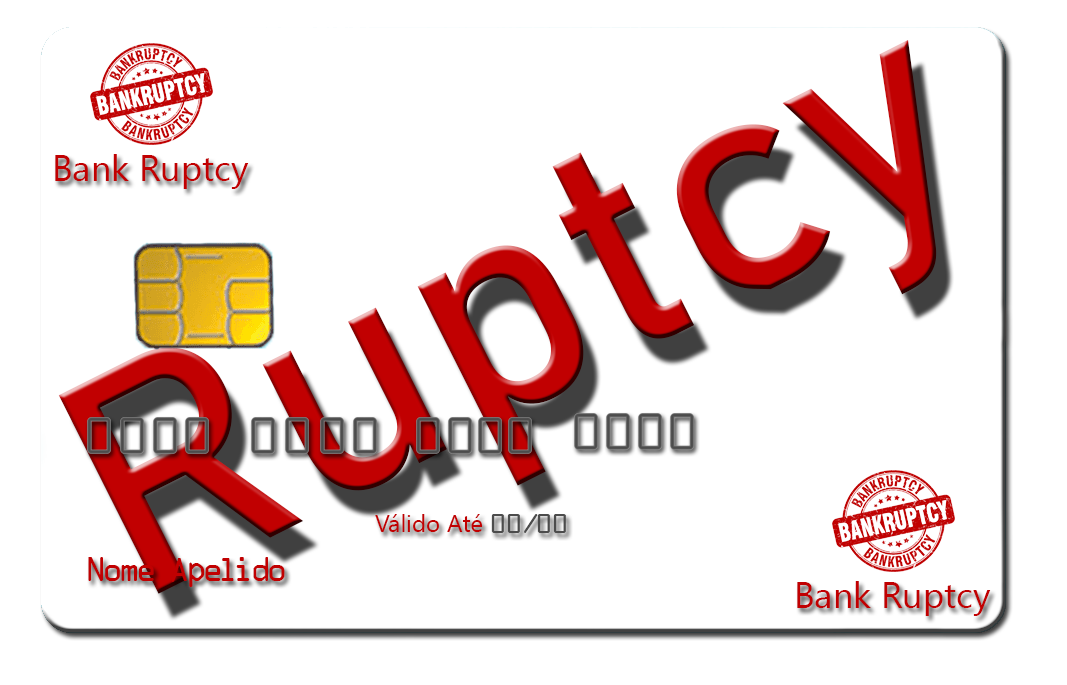
<style>
.page{position:relative;width:1067px;height:685px;background:#ffffff}
.page>*{position:absolute;margin:0}
.t1{font:312.6px "Bahnschrift";color:#c10001}
.t2{font:36px "SegoeUI";color:#c10001}
.t3{font:24px "SegoeUI";color:#c10001}
.t4{font:24px "OCR-A";color:#4c4c4c}
.t5{font:29.2px "OCR-A";color:#c10001}
</style>
<div class="page">
<p class="t1" style="left:58px;top:40px;width:879px;height:554px;rotate:-27deg">Ruptcy</p>
<p class="t2" style="left:55px;top:154px;width:194px;height:35px">Bank Ruptcy</p>
<p class="t3" style="left:375px;top:514px;width:108px;height:18px">Válido Até</p>
<p class="t4" style="left:491px;top:514px;width:75px;height:19px">00/00</p>
<p class="t5" style="left:88px;top:557px;width:197px;height:30px">Nome Apelido</p>
<p class="t2" style="left:797px;top:581px;width:194px;height:35px">Bank Ruptcy</p>
</div>
